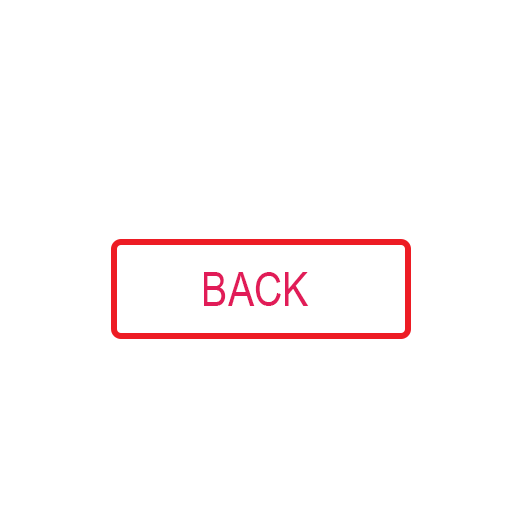
<style>
.page{position:relative;width:512px;height:512px;background:#ffffff}
.page>*{position:absolute;margin:0}
.t1{font:48px "ArialNarrow";color:#e11c58}
</style>
<div class="page">
<p class="t1" style="left:204px;top:272px;width:105px;height:34px">BACK</p>
</div>
